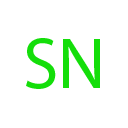
<style>
.page{position:relative;width:128px;height:128px;background:#ffffff}
.page>*{position:absolute;margin:0}
.t1{font:72px "MyriadPro-Regular";color:#14de0a}
</style>
<div class="page">
<p class="t1" style="left:26px;top:38px;width:74px;height:51px">SN</p>
</div>
